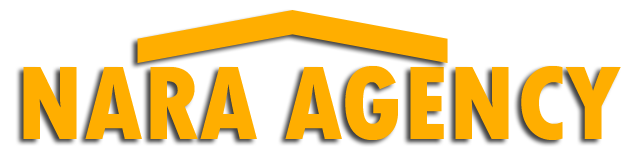
<style>
.page{position:relative;width:640px;height:160px;background:#ffffff}
.page>*{position:absolute;margin:0}
.t1{font:110px "TwCenMT-CondensedExtraBold";color:#ffae00}
</style>
<div class="page">
<p class="t1" style="left:23px;top:66px;width:598px;height:74px">NARA AGENCY</p>
</div>
